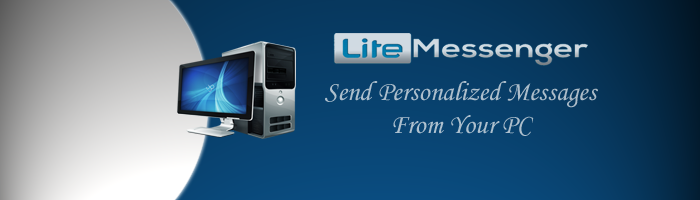
<style>
.page{position:relative;width:700px;height:200px}
.page>*{position:absolute;margin:0}
.t1{font:27.4px "MonotypeCorsiva";color:#adbecc}
</style>
<div class="page">
<p class="t1" style="left:325px;top:81px;width:273px;height:55px;text-align:center">Send Personalized Messages From Your PC</p>
</div>
